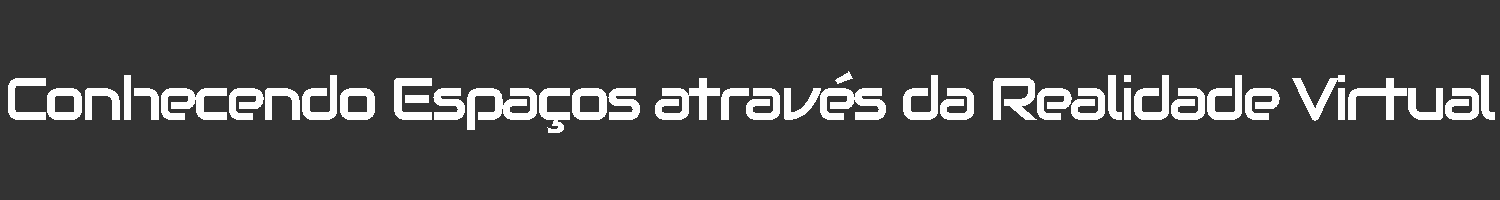
<style>
.page{position:relative;width:1500px;height:200px;background:#333333}
.page>*{position:absolute;margin:0}
.t1{font:60px "Audiowide-Regular";letter-spacing:-0.065em;color:#ffffff}
</style>
<div class="page">
<p class="t1" style="left:8px;top:71px;width:1487px;height:62px">Conhecendo Espaços através da Realidade Virtual</p>
</div>
